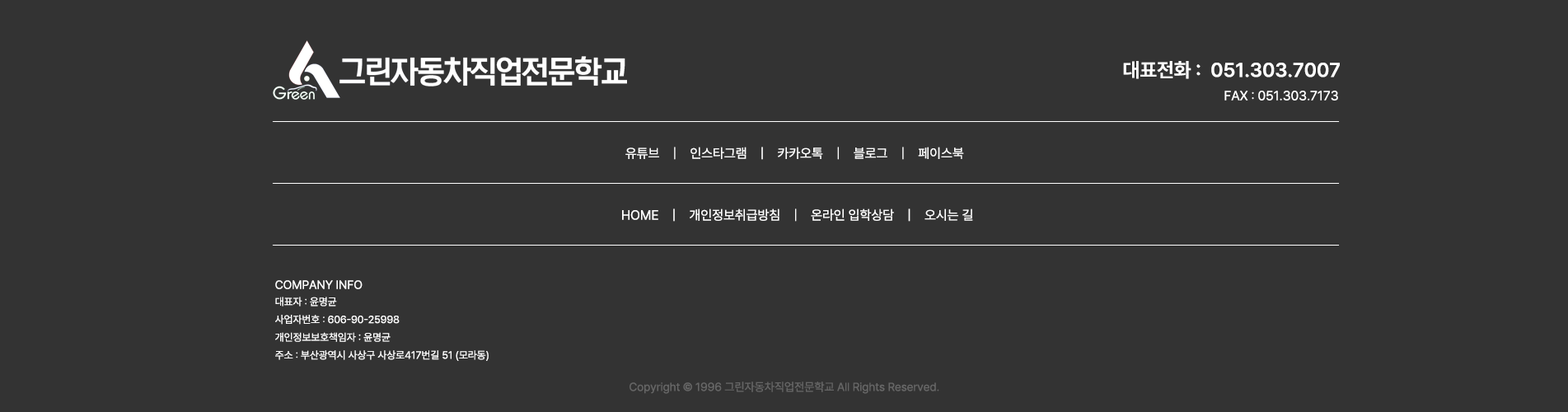
<style>
.page{position:relative;width:1568px;height:412px;background:#333333}
.page>*{position:absolute;margin:0}
.t1{font:19.8px/29.7px "Pretendard-SemiBold";color:#ffffff}
.t2{font:13.2px/29.7px "Pretendard-Regular";color:#ffffff}
.t3{font:13.2px "Pretendard-Regular";color:#ffffff}
.t4{font:10.4px/17.8px "Pretendard-Regular";color:#ffffff}
.t5{font:11.9px/17.8px "Pretendard-Regular";color:#ffffff}
.t6{font:11.5px "Pretendard-Regular";color:#666666}
</style>
<div class="page">
<p class="t1" style="left:1123px;top:61px;width:217px;height:40px;text-align:right">대표전화 :  051.303.7007 <br><span class="t2">FAX : 051.303.7173</span></p>
<p class="t3" style="left:625px;top:147px;width:339px;height:13px">유튜브    |    인스타그램    |    카카오톡    |    블로그    |    페이스북</p>
<p class="t3" style="left:622px;top:208px;width:351px;height:14px">HOME    |    개인정보취급방침    |    온라인 입학상담    |    오시는 길</p>
<p class="t4" style="left:275px;top:280px;width:214px;height:81px"><span class="t5">COMPANY INFO<br></span>대표자 : 윤명균 <br>사업자번호 : 606-90-25998 <br>개인정보보호책임자 : 윤명균<br>주소 : 부산광역시 사상구 사상로417번길 51 (모라동)</p>
<p class="t6" style="left:630px;top:381px;width:309px;height:13px">Copyright © 1996 그린자동차직업전문학교 All Rights Reserved.</p>
</div>
